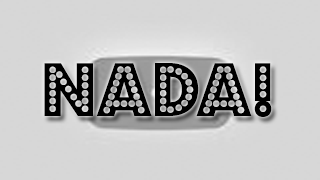
<style>
.page{position:relative;width:320px;height:180px;background:#d7d7d7}
.page>*{position:absolute;margin:0}
.t1{font:84px "BudmoJiggler-Regular";color:#000000}
</style>
<div class="page">
<p class="t1" style="left:44px;top:63px;width:228px;height:54px">NADA!</p>
</div>
